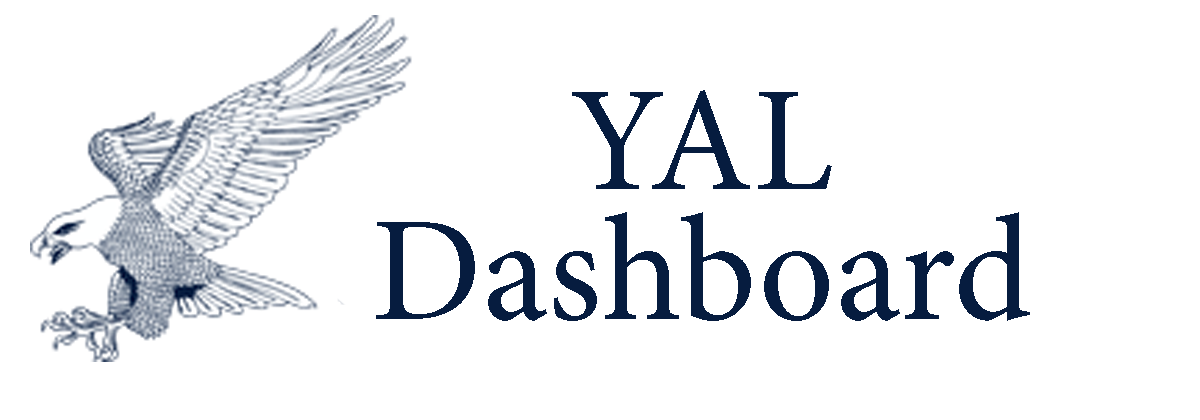
<style>
.page{position:relative;width:1200px;height:420px;background:#ffffff}
.page>*{position:absolute;margin:0}
.t1{font:150px/130px "MinionPro-Regular";color:#061c3f}
</style>
<div class="page">
<p class="t1" style="left:376px;top:90px;width:654px;height:231px;text-align:center">YAL<br>Dashboard</p>
</div>
